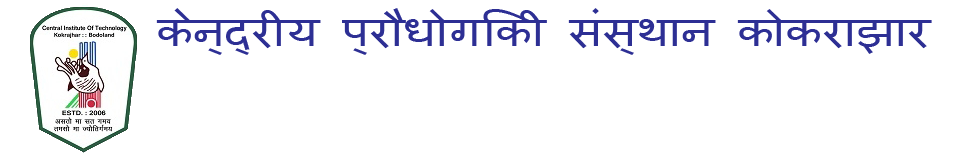
<style>
.page{position:relative;width:954px;height:157px;background:#ffffff}
.page>*{position:absolute;margin:0}
.t1{font:40.7px "Mangal";color:#2d2f94;scale:1.15 1}
</style>
<div class="page">
<p class="t1" style="left:156px;top:8px;width:776px;height:47px">केन्द्रीय प्रौधोगिकी संस्थान कोकराझार</p>
</div>
